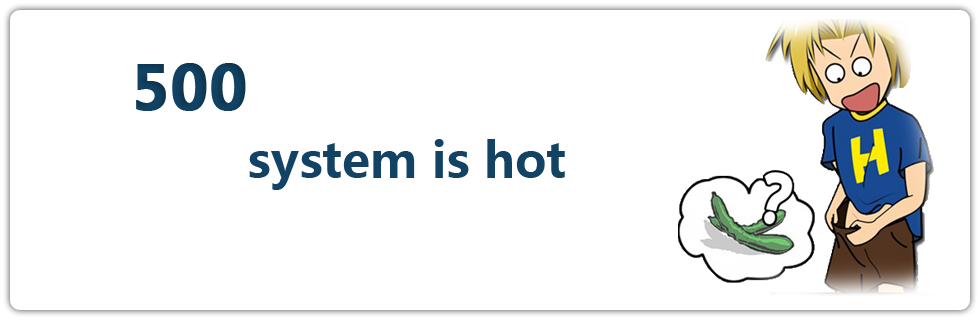
<style>
.page{position:relative;width:980px;height:320px;background:#ffffff}
.page>*{position:absolute;margin:0}
.t1{font:60px "MicrosoftYaHei-Bold";color:#124364;font-weight:bold}
.t2{font:48px "MicrosoftYaHei-Bold";color:#124364}
</style>
<div class="page">
<p class="t1" style="left:136px;top:63px;width:110px;height:48px">500</p>
<p class="t2" style="left:249px;top:139px;width:316px;height:51px">system is hot</p>
</div>
